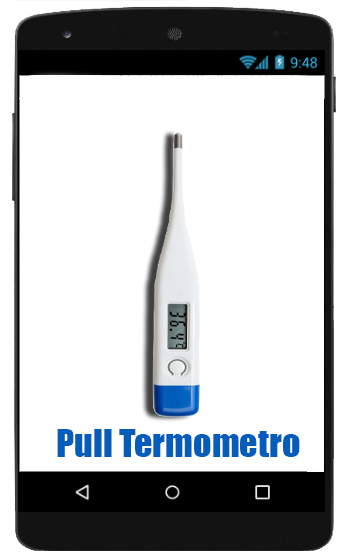
<style>
.page{position:relative;width:347px;height:559px;background:#ffffff}
.page>*{position:absolute;margin:0}
.t1{font:36px "Impact";color:#045dbb}
</style>
<div class="page">
<p class="t1" style="left:57px;top:429px;width:243px;height:28px">Pull Termometro</p>
</div>
